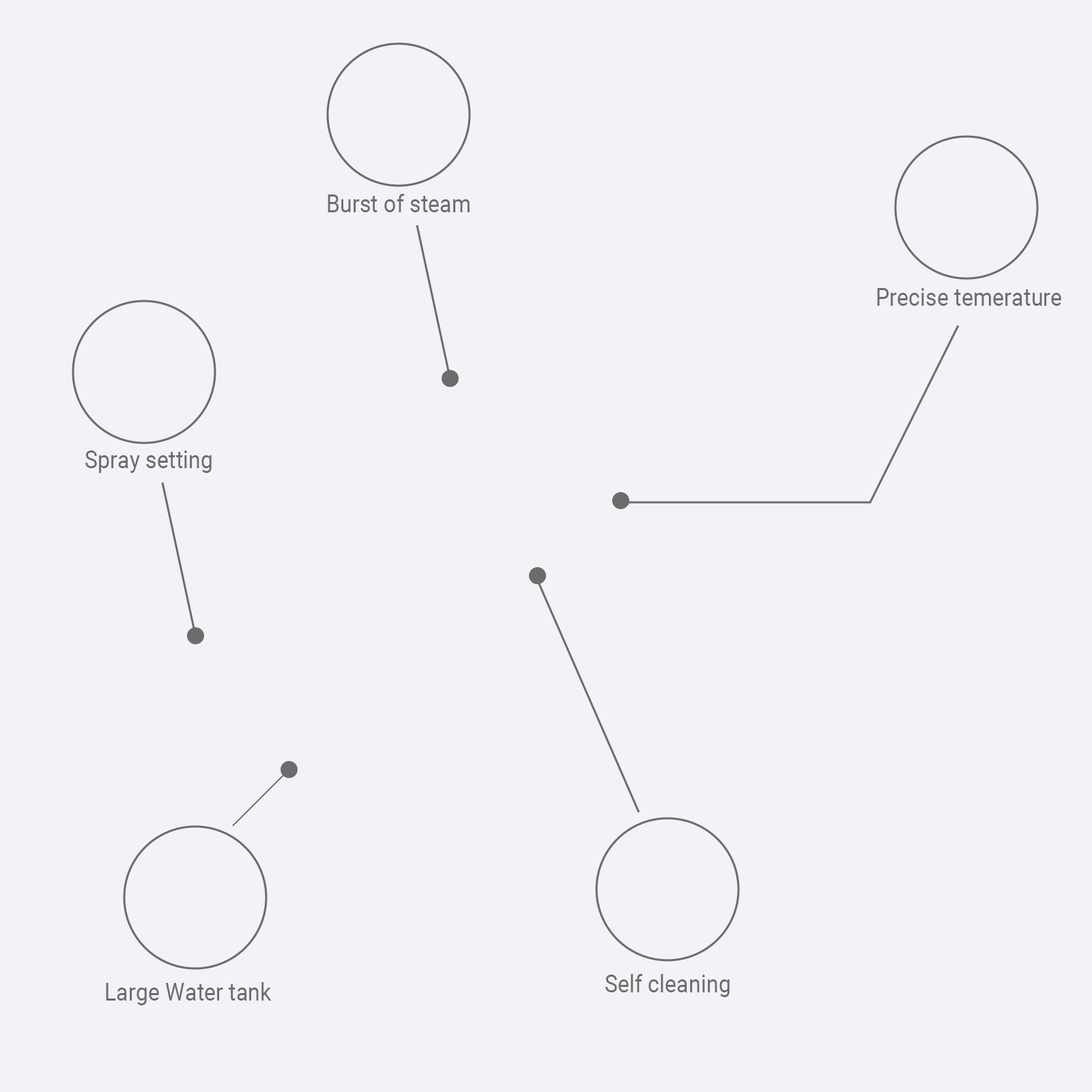
<style>
.page{position:relative;width:1092px;height:1092px;background:#f2f3f6}
.page>*{position:absolute;margin:0}
.t1{font:24.6px "Roboto-Regular";color:#6c6c6c;scale:0.9 1}
</style>
<div class="page">
<p class="t1" style="left:328px;top:194px;width:142px;height:18px">Burst of steam</p>
<p class="t1" style="left:877px;top:288px;width:184px;height:18px">Precise temerature</p>
<p class="t1" style="left:85px;top:450px;width:127px;height:23px">Spray setting</p>
<p class="t1" style="left:605px;top:974px;width:125px;height:23px">Self cleaning</p>
<p class="t1" style="left:106px;top:982px;width:166px;height:23px">Large Water tank</p>
</div>
